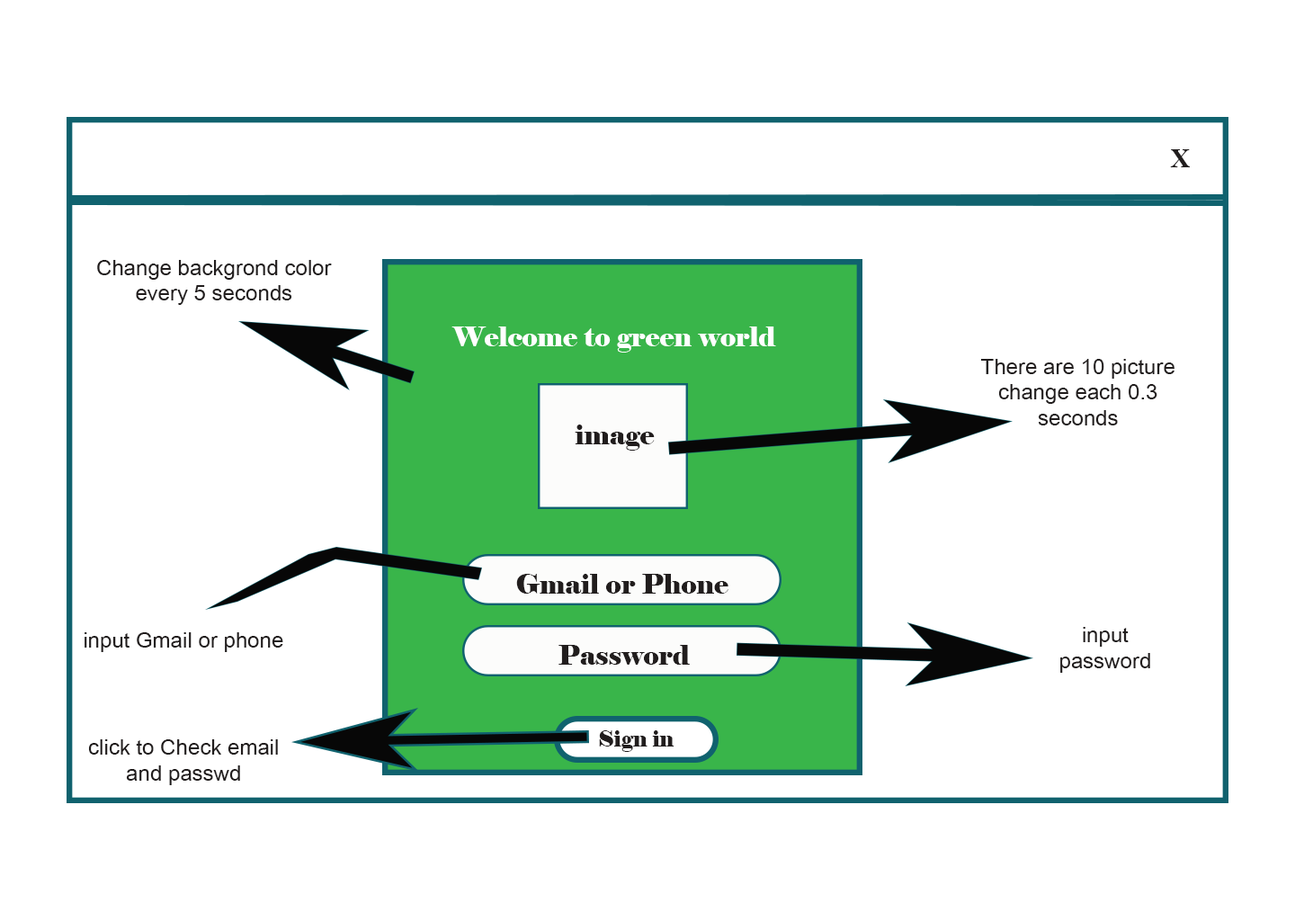
<style>
.page{position:relative;width:1295px;height:921px;background:#ffffff}
.page>*{position:absolute;margin:0}
.t1{font:27px "TimesNewRomanPS-BoldMT";color:#211d1d}
.t2{font:21.6px "DokChampa";color:#211d1d}
.t3{font:27px "Elephant-Regular";color:#ffffff}
.t4{font:27px "Elephant-Regular";color:#211d1d}
.t5{font:21.6px "Elephant-Regular";color:#211d1d}
</style>
<div class="page">
<p class="t1" style="left:1170px;top:149px;width:20px;height:18px">X</p>
<p class="t2" style="left:97px;top:260px;width:235px;height:45px;text-align:center">Change backgrond color<br>every 5 seconds</p>
<p class="t3" style="left:451px;top:326px;width:325px;height:27px">Welcome to green world</p>
<p class="t2" style="left:980px;top:359px;width:194px;height:66px;text-align:center">There are 10 picture<br>change each 0.3<br>seconds</p>
<p class="t4" style="left:575px;top:424px;width:80px;height:27px">image</p>
<p class="t4" style="left:516px;top:574px;width:212px;height:20px">Gmail or Phone</p>
<p class="t2" style="left:1060px;top:627px;width:90px;height:46px;text-align:center">input password</p>
<p class="t2" style="left:85px;top:632px;width:198px;height:20px">input Gmail or phone</p>
<p class="t4" style="left:558px;top:645px;width:132px;height:20px">Password</p>
<p class="t5" style="left:599px;top:730px;width:75px;height:22px">Sign in</p>
<p class="t2" style="left:88px;top:739px;width:190px;height:46px;text-align:center">click to Check email and passwd</p>
</div>
